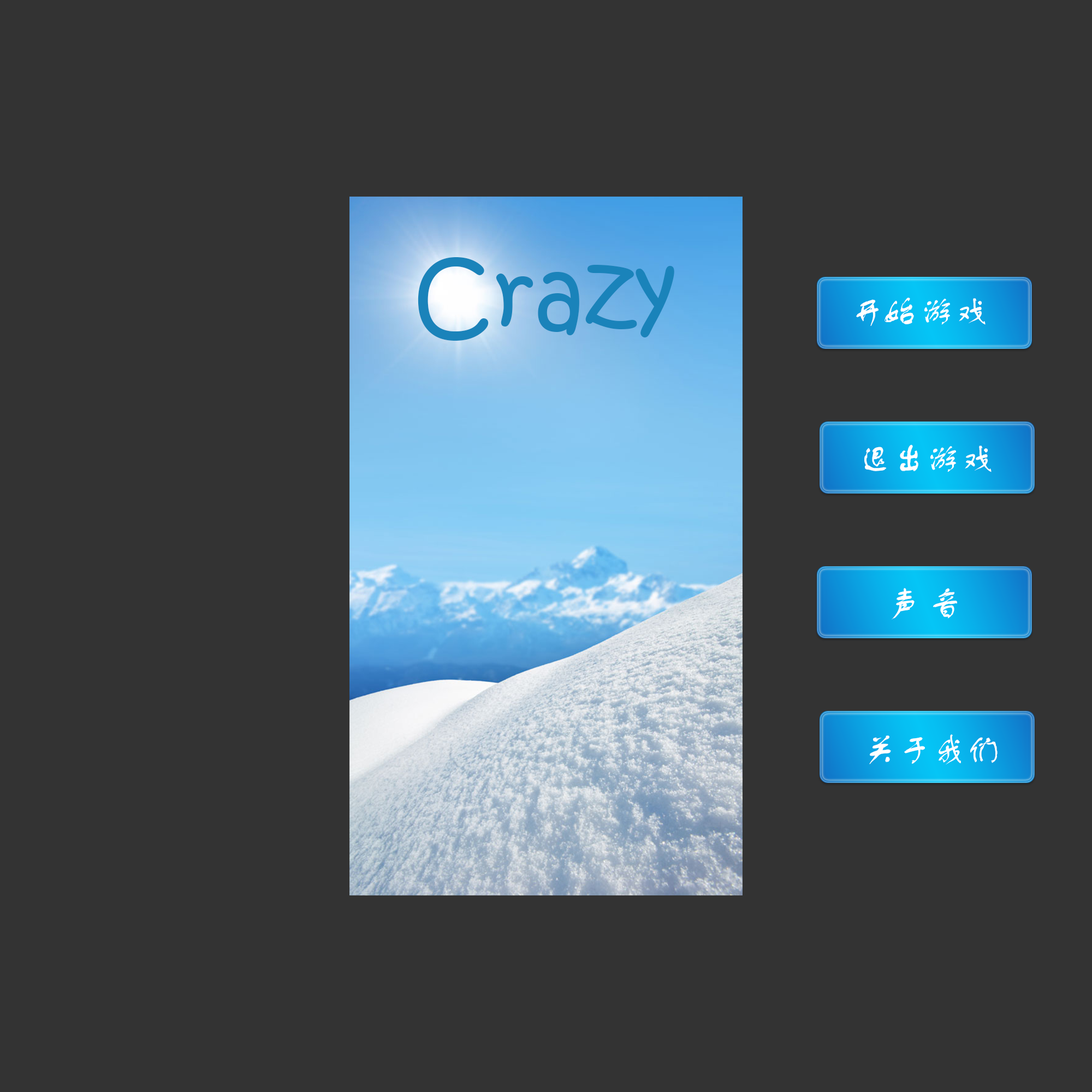
<style>
.page{position:relative;width:1092px;height:1092px;background:#333333}
.page>*{position:absolute;margin:0}
.t1{font:93.9px "KristenITC-Regular";color:#1a83ba}
.t2{font:34.9px "FZSTK--GBK1-0";color:#ffffff}
</style>
<div class="page">
<p class="t1" style="left:418px;top:257px;width:256px;height:84px">Crazy</p>
<p class="t2" style="left:856px;top:298px;width:130px;height:28px">开始游戏</p>
<p class="t2" style="left:864px;top:444px;width:128px;height:28px">退出游戏</p>
<p class="t2" style="left:892px;top:588px;width:65px;height:32px">声 音</p>
<p class="t2" style="left:869px;top:734px;width:129px;height:31px">关于我们</p>
</div>
